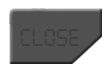
<style>
.page{position:relative;width:110px;height:72px;background:#505050}
.page>*{position:absolute;margin:0}
.t1{font:26px "DS-Digital";letter-spacing:-0.025em;color:#404040}
</style>
<div class="page">
<p class="t1" style="left:20px;top:29px;width:60px;height:17px">close</p>
</div>
